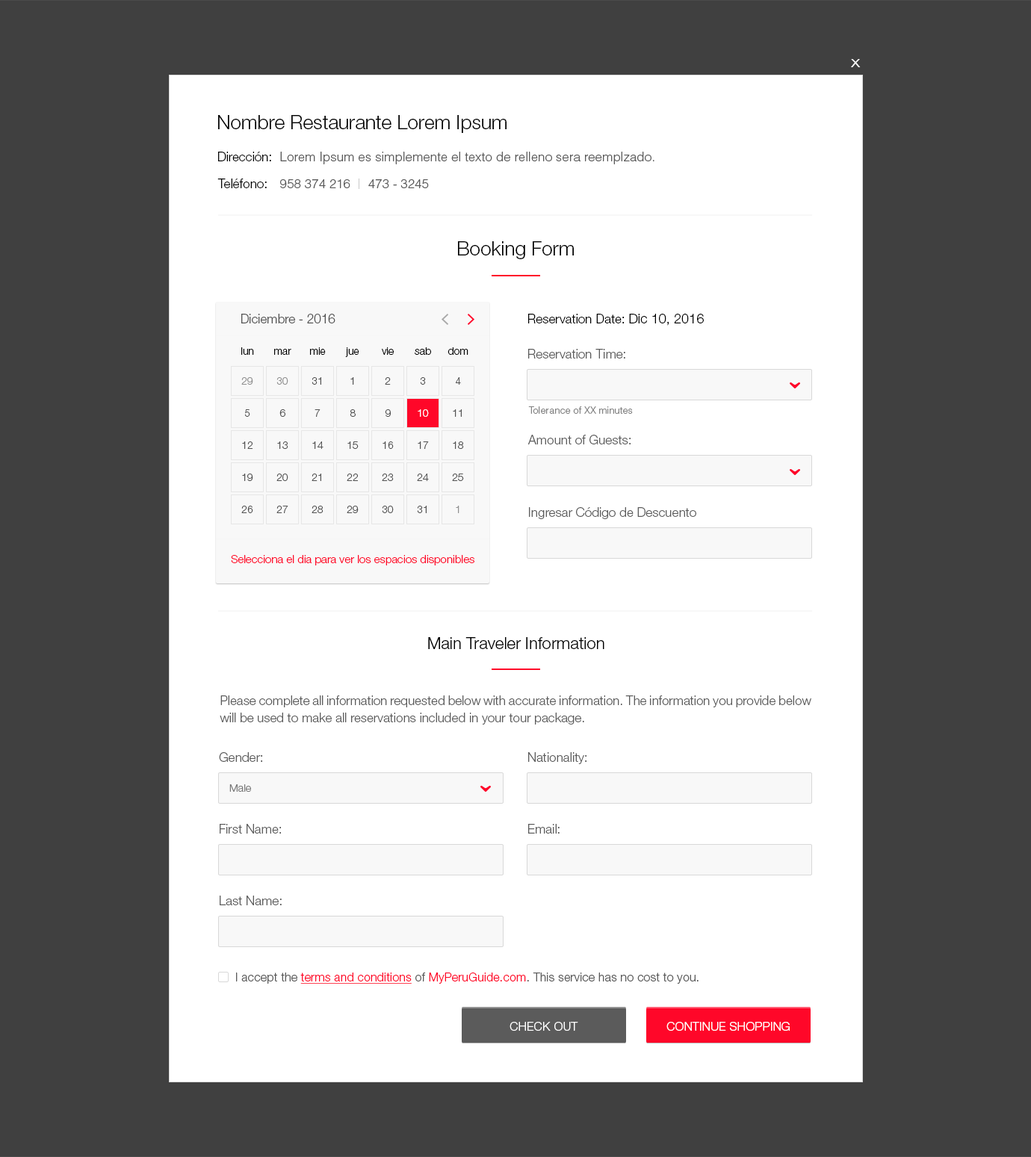
<style>
.page{position:relative;width:1031px;height:1157px;background:#ffffff}
.page>*{position:absolute;margin:0}
.t1{font:15.7px "HelveticaNeueLTStd-Lt";color:#ffffff;scale:1.18 1}
.t2{font:19.4px "HelveticaNeueLTStd-Lt";color:#000000}
.t3{font:12.7px "HelveticaNeueLTStd-Lt";color:#000000}
.t4{font:12.7px "HelveticaLTStd-Light";color:#5b5b5b}
.t5{font:12.7px "HelveticaNeueLTStd-Lt";color:#525252}
.t6{font:13.4px "HelveticaNeueLTStd-Lt";color:#000000}
.t7{font:10.5px "HelveticaNeueLTStd-Lt";color:#000000}
.t8{font:12.7px "HelveticaNeueLTStd-Lt";color:#5b5b5b}
.t9{font:10.5px "HelveticaNeueLTStd-Lt";color:#909090}
.t10{font:10.5px "HelveticaNeueLTStd-Lt";color:#525252}
.t11{font:10.5px "HelveticaNeueLTStd-Lt";color:#ffffff}
.t12{font:9.7px "HelveticaLTStd-Light";color:#818181}
.t13{font:11.2px "HelveticaNeueLTStd-Lt";color:#ff0729}
.t14{font:16.4px "HelveticaNeueLTStd-Lt";color:#000000}
.t15{font:12.7px/17.2px "HelveticaNeueLTStd-Lt";color:#5b5b5b}
.t16{font:10.5px "HelveticaNeueLTStd-Lt";letter-spacing:0.01em;color:#787878}
.t17{font:12px "HelveticaNeueLTStd-Lt";letter-spacing:0.01em;color:#5b5b5b}
.t18{font:12px "HelveticaNeueLTStd-Lt";letter-spacing:0.01em;color:#ff0729;text-decoration:underline}
.t19{font:12px "HelveticaNeueLTStd-Lt";letter-spacing:0.01em;color:#ff0729}
.t20{font:12px "HelveticaNeueLTStd-Lt";letter-spacing:0.01em;color:#ffffff;text-transform:uppercase}
</style>
<div class="page">
<p class="t1" style="left:851px;top:59px;width:9px;height:8px">x</p>
<p class="t2" style="left:218px;top:115px;width:288px;height:18px">Nombre Restaurante Lorem Ipsum</p>
<p class="t3" style="left:218px;top:152px;width:53px;height:9px">Dirección:</p>
<p class="t4" style="left:280px;top:152px;width:374px;height:12px">Lorem Ipsum es simplemente el texto de relleno sera reemplzado.</p>
<p class="t3" style="left:217px;top:179px;width:50px;height:9px">Teléfono:</p>
<p class="t4" style="left:280px;top:179px;width:149px;height:9px">958 374 216     473 - 3245</p>
<p class="t2" style="left:458px;top:241px;width:116px;height:18px">Booking Form</p>
<p class="t5" style="left:241px;top:314px;width:94px;height:9px">Diciembre - 2016</p>
<p class="t3" style="left:528px;top:314px;width:176px;height:12px">Reservation Date: <span class="t6">Dic 10, 2016</span></p>
<p class="t7" style="left:241px;top:347px;width:13px;height:8px">lun</p>
<p class="t7" style="left:274px;top:349px;width:17px;height:6px">mar</p>
<p class="t7" style="left:310px;top:347px;width:16px;height:8px">mie</p>
<p class="t7" style="left:345px;top:347px;width:14px;height:10px">jue</p>
<p class="t7" style="left:382px;top:347px;width:12px;height:8px">vie</p>
<p class="t7" style="left:415px;top:347px;width:16px;height:8px">sab</p>
<p class="t7" style="left:447px;top:347px;width:21px;height:8px">dom</p>
<p class="t8" style="left:528px;top:349px;width:97px;height:10px">Reservation Time:</p>
<p class="t9" style="left:241px;top:377px;width:12px;height:8px">29</p>
<p class="t9" style="left:276px;top:377px;width:12px;height:8px">30</p>
<p class="t10" style="left:311px;top:377px;width:10px;height:8px">31</p>
<p class="t10" style="left:350px;top:377px;width:4px;height:8px">1</p>
<p class="t10" style="left:385px;top:377px;width:6px;height:8px">2</p>
<p class="t10" style="left:420px;top:377px;width:6px;height:8px">3</p>
<p class="t10" style="left:456px;top:377px;width:5px;height:8px">4</p>
<p class="t10" style="left:244px;top:409px;width:6px;height:8px">5</p>
<p class="t10" style="left:279px;top:409px;width:6px;height:8px">6</p>
<p class="t10" style="left:314px;top:409px;width:6px;height:8px">7</p>
<p class="t10" style="left:350px;top:409px;width:6px;height:8px">8</p>
<p class="t10" style="left:385px;top:409px;width:6px;height:8px">9</p>
<p class="t11" style="left:418px;top:409px;width:11px;height:8px">10</p>
<p class="t10" style="left:453px;top:409px;width:9px;height:8px">11</p>
<p class="t12" style="left:528px;top:406px;width:105px;height:8px">Tolerance of XX minutes</p>
<p class="t8" style="left:527px;top:435px;width:103px;height:9px">Amount of Guests:</p>
<p class="t10" style="left:242px;top:441px;width:10px;height:8px">12</p>
<p class="t10" style="left:277px;top:441px;width:11px;height:8px">13</p>
<p class="t10" style="left:312px;top:441px;width:11px;height:8px">14</p>
<p class="t10" style="left:347px;top:441px;width:12px;height:8px">15</p>
<p class="t10" style="left:382px;top:441px;width:12px;height:8px">16</p>
<p class="t10" style="left:418px;top:441px;width:11px;height:8px">17</p>
<p class="t10" style="left:453px;top:441px;width:11px;height:8px">18</p>
<p class="t10" style="left:242px;top:474px;width:11px;height:7px">19</p>
<p class="t10" style="left:276px;top:474px;width:12px;height:7px">20</p>
<p class="t10" style="left:311px;top:474px;width:10px;height:7px">21</p>
<p class="t10" style="left:347px;top:474px;width:11px;height:7px">22</p>
<p class="t10" style="left:382px;top:474px;width:12px;height:7px">23</p>
<p class="t10" style="left:417px;top:474px;width:12px;height:7px">24</p>
<p class="t10" style="left:452px;top:474px;width:12px;height:7px">25</p>
<p class="t10" style="left:241px;top:506px;width:12px;height:7px">26</p>
<p class="t10" style="left:276px;top:506px;width:12px;height:7px">27</p>
<p class="t10" style="left:311px;top:506px;width:12px;height:7px">28</p>
<p class="t10" style="left:347px;top:506px;width:12px;height:7px">29</p>
<p class="t10" style="left:382px;top:506px;width:12px;height:7px">30</p>
<p class="t10" style="left:417px;top:506px;width:9px;height:7px">31</p>
<p class="t9" style="left:456px;top:506px;width:3px;height:7px">1</p>
<p class="t8" style="left:529px;top:507px;width:167px;height:12px">Ingresar Código de Descuento</p>
<p class="t13" style="left:231px;top:555px;width:243px;height:10px">Selecciona el dia para ver los espacios disponibles</p>
<p class="t14" style="left:428px;top:637px;width:176px;height:12px">Main Traveler Information</p>
<p class="t15" style="left:220px;top:695px;width:591px;height:29px;text-align:justify">Please complete all information requested below with accurate information. The information you provide below will be used to make all reservations included in your tour package.</p>
<p class="t8" style="left:219px;top:752px;width:43px;height:10px">Gender:</p>
<p class="t8" style="left:528px;top:752px;width:58px;height:12px">Nationality:</p>
<p class="t16" style="left:229px;top:784px;width:22px;height:8px">Male</p>
<p class="t8" style="left:220px;top:824px;width:61px;height:10px">First Name:</p>
<p class="t8" style="left:528px;top:824px;width:31px;height:10px">Email:</p>
<p class="t8" style="left:220px;top:896px;width:62px;height:9px">Last Name:</p>
<p class="t17" style="left:236px;top:972px;width:462px;height:12px">I accept the <span class="t18">terms and conditions</span> of <span class="t19">MyPeruGuide.com</span>. This service has no cost to you.</p>
<p class="t20" style="left:509px;top:1022px;width:69px;height:9px">Check Out</p>
<p class="t20" style="left:666px;top:1022px;width:123px;height:9px">Continue Shopping</p>
</div>
